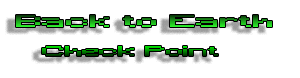
<style>
.page{position:relative;width:300px;height:78px;background:#ffffff}
.page>*{position:absolute;margin:0}
.t1{font:15.5px "Minecraft";scale:2.46 1}
.t2{font:12.5px "Minecraft";scale:2.46 1}
</style>
<div class="page">
<p class="t1" style="left:16px;top:15px;width:256px;height:12px">Back to Earth</p>
<p class="t2" style="left:42px;top:46px;width:176px;height:10px">Check Point</p>
</div>
